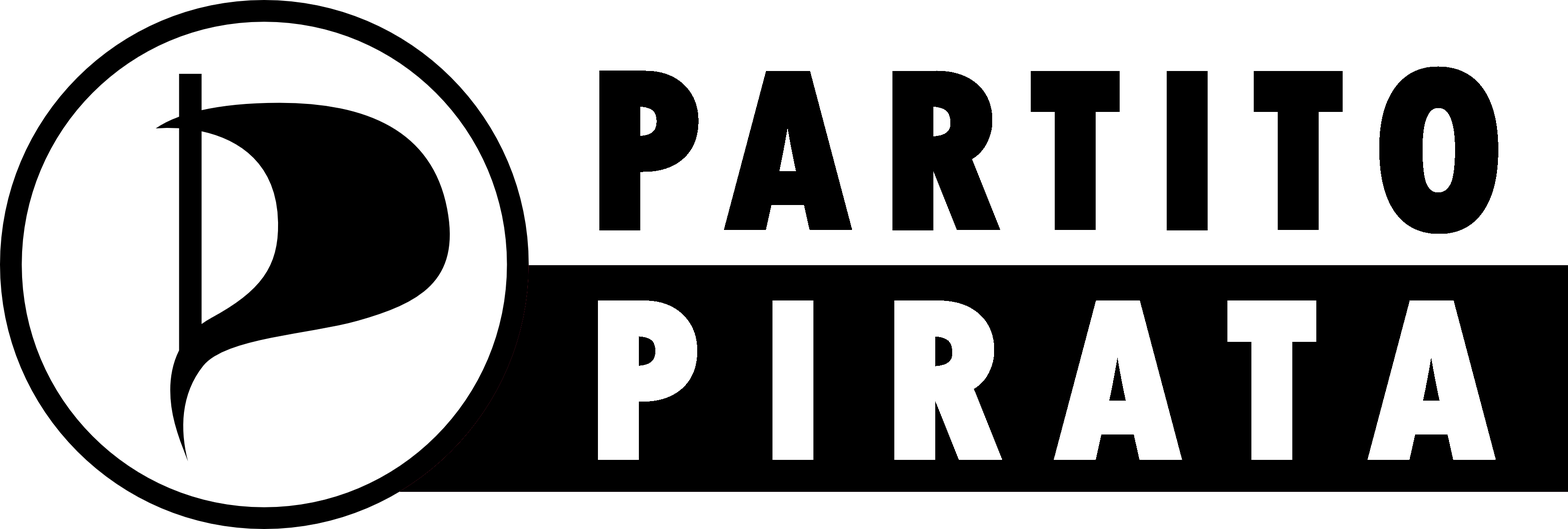
<style>
.page{position:relative;width:1568px;height:529px;background:#ffffff}
.page>*{position:absolute;margin:0}
.t1{font:235.2px "TwCenMT-CondensedExtraBold";letter-spacing:0.1em;color:#000000;font-weight:bold}
.t2{font:235.2px "TwCenMT-CondensedExtraBold";letter-spacing:0.2em;color:#ffffff;font-weight:bold}
</style>
<div class="page">
<p class="t1" style="left:599px;top:66px;width:899px;height:168px">PARTITO</p>
<p class="t2" style="left:598px;top:301px;width:898px;height:159px">PIRATA</p>
</div>
